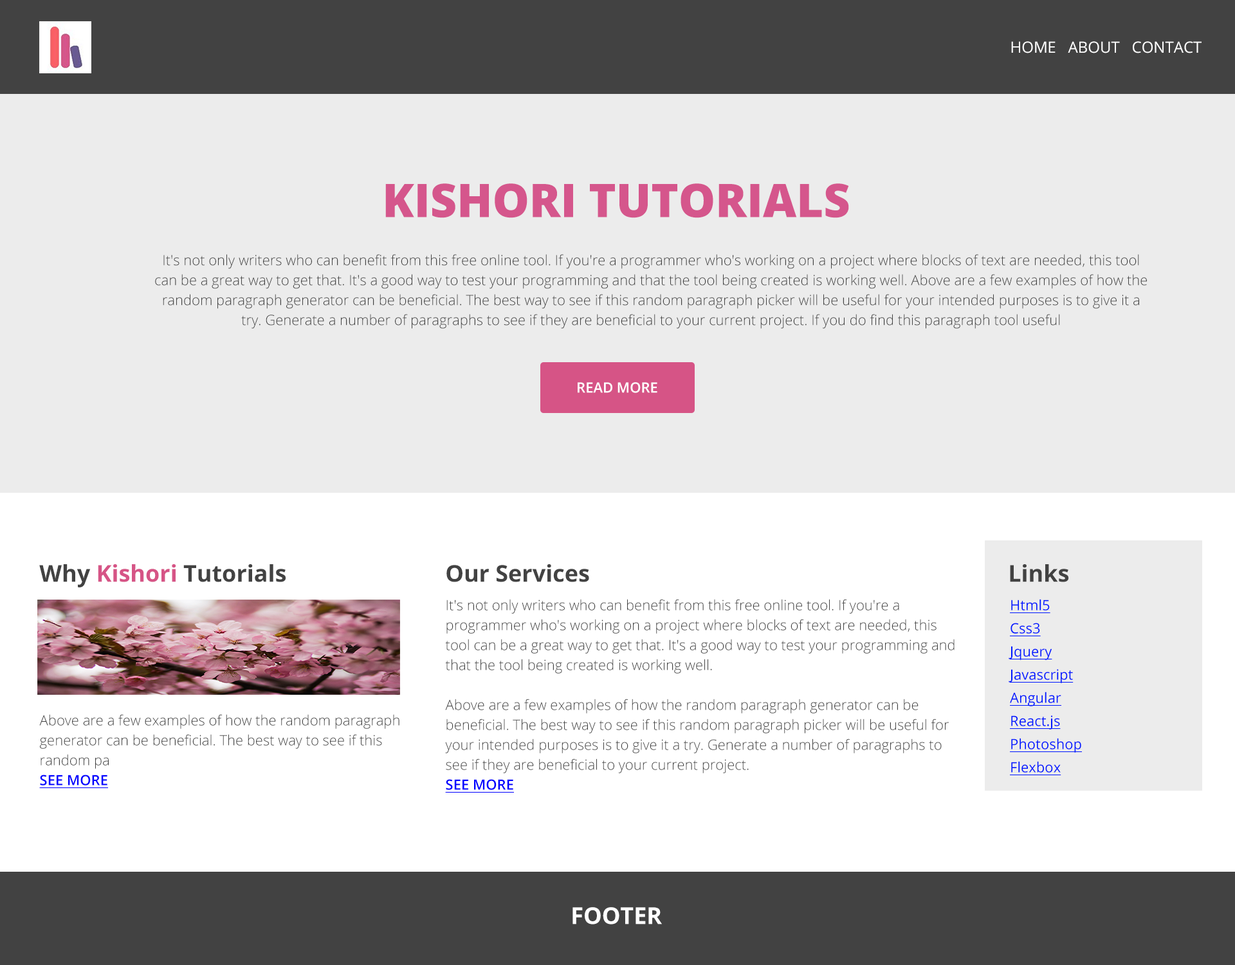
<style>
.page{position:relative;width:1235px;height:965px;background:#ececec}
.page>*{position:absolute;margin:0}
.t1{font:15.4px "OpenSans-Regular";color:#ffffff}
.t2{font:46.3px "OpenSans-ExtraBold";color:#d5568c}
.t3{font:14.2px/19.9px "OpenSans-Light";color:#424242}
.t4{font:14.2px "OpenSans-SemiBold";color:#ffffff}
.t5{font:23.2px "OpenSans-Bold";color:#424242}
.t6{font:23.2px "OpenSans-Bold";color:#d65486}
.t7{font:14.2px/19.9px "OpenSans-SemiBold";color:#0000ff;text-decoration:underline}
.t8{font:14.2px/23.2px "OpenSans-Regular";color:#0018ff;text-decoration:underline}
.t9{font:23.2px "OpenSans-Bold";color:#ffffff}
</style>
<div class="page">
<p class="t1" style="left:1012px;top:41px;width:190px;height:12px">HOME   ABOUT   CONTACT</p>
<p class="t2" style="left:385px;top:183px;width:464px;height:35px">KISHORI TUTORIALS</p>
<p class="t3" style="left:155px;top:254px;width:992px;height:75px;text-align:center">It's not only writers who can benefit from this free online tool. If you're a programmer who's working on a project where blocks of text are needed, this tool can be a great way to get that. It's a good way to test your programming and that the tool being created is working well. Above are a few examples of how the random paragraph generator can be beneficial. The best way to see if this random paragraph picker will be useful for your intended purposes is to give it a try. Generate a number of paragraphs to see if they are beneficial to your current project. If you do find this paragraph tool useful</p>
<p class="t4" style="left:578px;top:382px;width:80px;height:11px">READ MORE</p>
<p class="t5" style="left:39px;top:564px;width:247px;height:23px">Why <span class="t6">Kishori</span> Tutorials</p>
<p class="t5" style="left:447px;top:564px;width:142px;height:18px">Our Services</p>
<p class="t5" style="left:1010px;top:564px;width:59px;height:18px">Links</p>
<p class="t3" style="left:445px;top:599px;width:510px;height:194px">It's not only writers who can benefit from this free online tool. If you're a programmer who's working on a project where blocks of text are needed, this tool can be a great way to get that. It's a good way to test your programming and that the tool being created is working well.<br><br>Above are a few examples of how the random paragraph generator can be beneficial. The best way to see if this random paragraph picker will be useful for your intended purposes is to give it a try. Generate a number of paragraphs to see if they are beneficial to your current project.<br><span class="t7">SEE MORE<br></span><br>how you're using it. It's greatly beneficial for us to know the different ways this tool is being used so we can improve it with updates. This is especially true since there are times when the generators we create get used in completely unanticipated ways from when we initially created them. If you have the time, please send us a quick note on what you'd like to see changed or added to make it better in the future.</p>
<p class="t8" style="left:1009px;top:599px;width:73px;height:176px">Html5<br>Css3<br>Jquery<br>Javascript<br>Angular<br>React.js<br>Photoshop<br>Flexbox</p>
<p class="t3" style="left:39px;top:714px;width:361px;height:74px">Above are a few examples of how the random paragraph generator can be beneficial. The best way to see if this random pa<br><span class="t7">SEE MORE</span></p>
<p class="t9" style="left:573px;top:907px;width:89px;height:18px">FOOTER</p>
</div>
